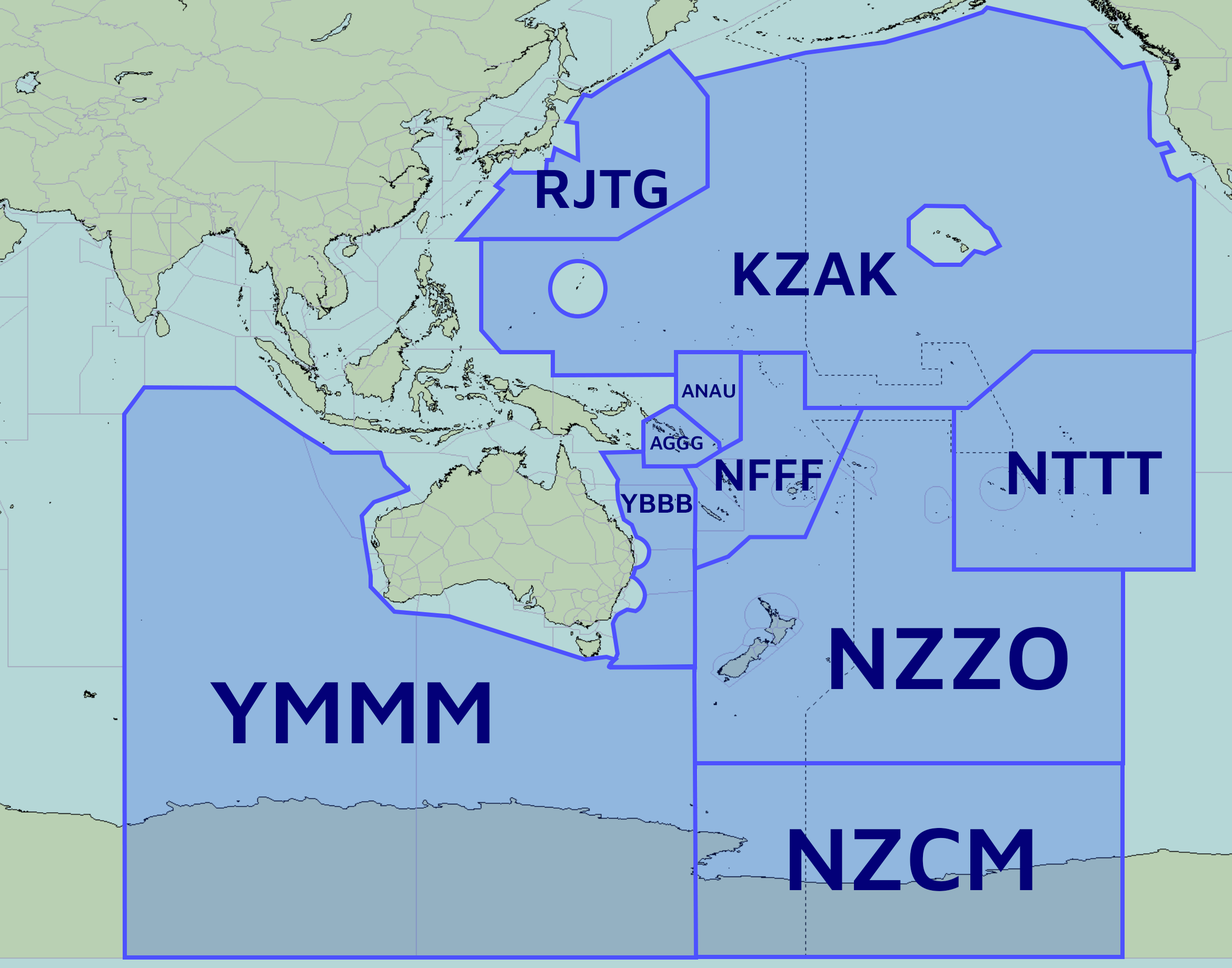
<style>
.page{position:relative;width:1232px;height:968px;background:#91b7df}
.page>*{position:absolute;margin:0}
.t1{font:56.7px "MavenPro-SemiBold";color:#030078}
.t2{font:64.3px "MavenPro-SemiBold";color:#030078}
.t3{font:19.7px "MavenPro-SemiBold";color:#030078}
.t4{font:46.7px "MavenPro-SemiBold";color:#030078}
.t5{font:28px "MavenPro-SemiBold";color:#030078}
.t6{font:91.4px "MavenPro-SemiBold";color:#030078}
</style>
<div class="page">
<p class="t1" style="left:537px;top:169px;width:130px;height:40px">RJTG</p>
<p class="t2" style="left:734px;top:252px;width:164px;height:43px">KZAK</p>
<p class="t3" style="left:681px;top:384px;width:54px;height:14px">ANAU</p>
<p class="t3" style="left:650px;top:436px;width:53px;height:14px">AGGG</p>
<p class="t4" style="left:715px;top:459px;width:108px;height:32px">NFFF</p>
<p class="t2" style="left:1009px;top:451px;width:153px;height:43px">NTTT</p>
<p class="t5" style="left:620px;top:494px;width:72px;height:19px">YBBB</p>
<p class="t6" style="left:831px;top:627px;width:237px;height:64px">NZZO</p>
<p class="t6" style="left:210px;top:682px;width:280px;height:61px">YMMM</p>
<p class="t6" style="left:790px;top:828px;width:242px;height:63px">NZCM</p>
</div>
